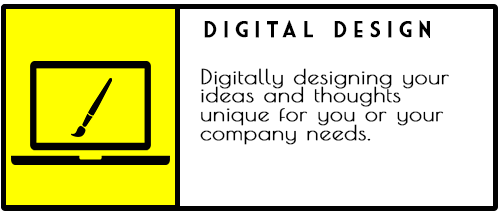
<style>
.page{position:relative;width:500px;height:215px;background:#ffffff}
.page>*{position:absolute;margin:0}
.t1{font:22.1px "MarketDeco";letter-spacing:0.26em;color:#000000;font-weight:bold}
.t2{font:20.2px "PoiretOne-Regular";letter-spacing:0.02em;color:#000000;font-weight:bold;scale:1.13 1}
</style>
<div class="page">
<p class="t1" style="left:204px;top:20px;width:226px;height:18px">digital design</p>
<p class="t2" style="left:200px;top:68px;width:249px;height:77px">Digitally designing your <br>ideas and thoughts<br>unique for you or your<br>company needs.</p>
</div>
